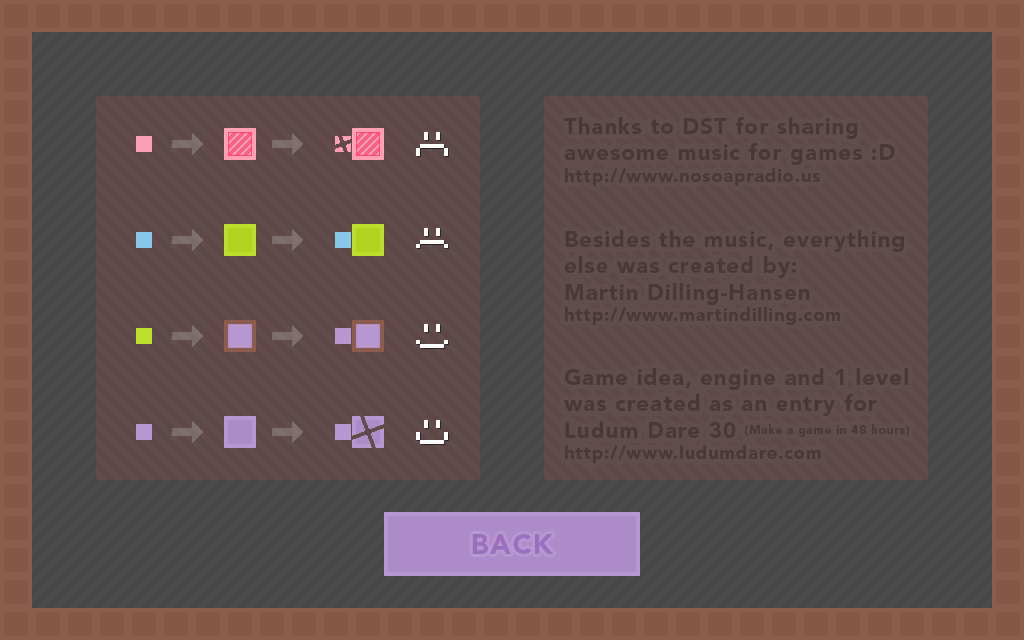
<style>
.page{position:relative;width:1024px;height:640px;background:#624c4c}
.page>*{position:absolute;margin:0}
.t1{font:22px "AvenirLTStd-Black";letter-spacing:0.05em;color:#4a3636}
.t2{font:18px "AvenirLTStd-Black";letter-spacing:0.05em;color:#4a3636}
.t3{font:12px "AvenirLTStd-Black";letter-spacing:0.05em;color:#4a3636}
</style>
<div class="page">
<p class="t1" style="left:564px;top:117px;width:331px;height:69px">Thanks to DST for sharing<br>awesome music for games :D<br><span class="t2">http://www.nosoapradio.us</span></p>
<p class="t1" style="left:564px;top:230px;width:340px;height:95px">Besides the music, everything<br>else was created by:<br>Martin Dilling-Hansen<br><span class="t2">http://www.martindilling.com</span></p>
<p class="t1" style="left:564px;top:368px;width:345px;height:95px">Game idea, engine and 1 level<br>was created as an entry for<br>Ludum Dare 30 <span class="t3">(Make a game in 48 hours)<br></span><span class="t2">http://www.ludumdare.com</span></p>
</div>
